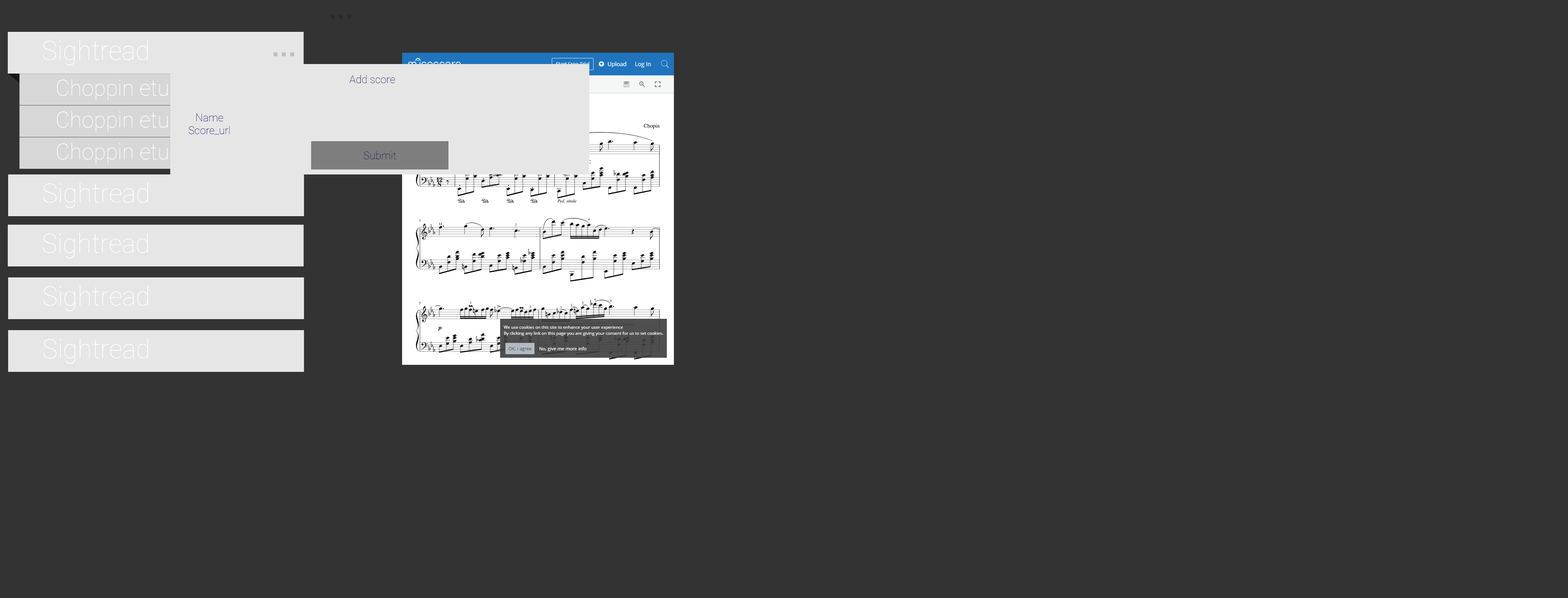
<style>
.page{position:relative;width:1568px;height:598px;background:#333333}
.page>*{position:absolute;margin:0}
.t1{font:26.4px "Roboto-Thin";color:#ffffff}
.t2{font:10.6px "Roboto-Thin";color:#1b1464}
.t3{font:22px "Roboto-Thin";color:#ffffff}
</style>
<div class="page">
<p class="t1" style="left:43px;top:40px;width:105px;height:25px">Sightread</p>
<p class="t2" style="left:349px;top:75px;width:46px;height:8px">Add score</p>
<p class="t3" style="left:57px;top:79px;width:148px;height:21px">Choppin etude 1</p>
<p class="t3" style="left:57px;top:111px;width:148px;height:21px">Choppin etude 1</p>
<p class="t2" style="left:189px;top:114px;width:41px;height:21px;text-align:center">Name<br>Score_url</p>
<p class="t3" style="left:57px;top:143px;width:148px;height:21px">Choppin etude 1</p>
<p class="t2" style="left:364px;top:151px;width:32px;height:8px">Submit</p>
<p class="t1" style="left:43px;top:183px;width:105px;height:25px">Sightread</p>
<p class="t1" style="left:43px;top:233px;width:105px;height:25px">Sightread</p>
<p class="t1" style="left:43px;top:286px;width:105px;height:25px">Sightread</p>
<p class="t1" style="left:43px;top:338px;width:105px;height:26px">Sightread</p>
</div>
